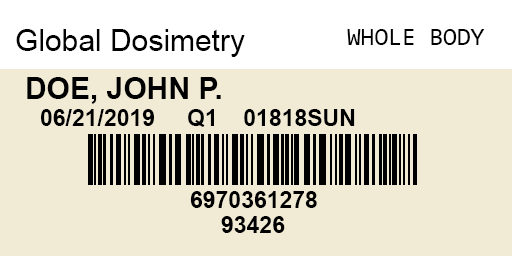
<style>
.page{position:relative;width:512px;height:256px;background:#f1ebd5}
.page>*{position:absolute;margin:0}
.t1{font:30px "ArialMT";color:#000000}
.t2{font:25px "Consolas";color:#000000}
.t3{font:30px "Arial-BoldMT";color:#000000}
.t4{font:23px "Arial-BoldMT";color:#000000}
</style>
<div class="page">
<p class="t1" style="left:16px;top:29px;width:229px;height:28px">Global Dosimetry</p>
<p class="t2" style="left:347px;top:29px;width:138px;height:16px">WHOLE BODY</p>
<p class="t3" style="left:27px;top:77px;width:194px;height:27px">DOE, JOHN P.</p>
<p class="t4" style="left:41px;top:109px;width:314px;height:18px">06/21/2019     Q1    01818SUN</p>
<p class="t4" style="left:190px;top:191px;width:127px;height:17px">6970361278</p>
<p class="t4" style="left:221px;top:216px;width:64px;height:17px">93426</p>
</div>
